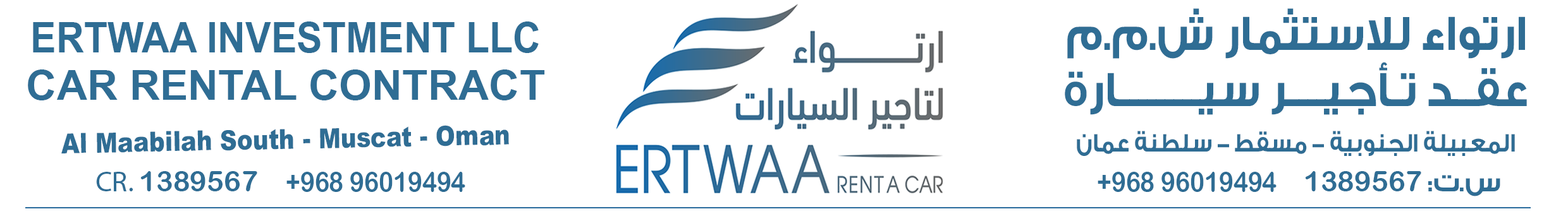
<style>
.page{position:relative;width:1568px;height:221px;background:#ffffff}
.page>*{position:absolute;margin:0}
.t1{font:51.1px "GESSTwoBold-Bold";color:#2f6d94;scale:0.88 1}
.t2{font:42.5px "ArialNarrow-Bold";color:#2f6d94;text-transform:uppercase;scale:1.11 1}
.t3{font:51.1px "GESSTwoBold-Bold";color:#2f6d94;scale:0.87 1}
.t4{font:41px "ArialNarrow-Bold";color:#2f6d94;text-transform:uppercase;scale:1.25 1}
.t5{font:27.6px "Arial-Black";color:#2f6d94;scale:0.85 1}
.t6{font:27px "GESSTwoBold-Bold";color:#2f6d94;scale:0.86 1}
.t7{font:28.5px "ArialRoundedMTBold";color:#2f6d94}
.t8{font:28.5px "MyriadPro-Regular";color:#2f6d94}
.t9{font:28.5px "ArialRoundedMTBold";color:#2f6d94;scale:0.86 1}
.t10{font:28.5px "GESSTwoBold-Bold";color:#2f6d94}
</style>
<div class="page">
<p class="t1" style="left:1067px;top:8px;width:458px;height:51px">ارتواء للاستثمار ش.م.م</p>
<p class="t2" style="left:33px;top:21px;width:506px;height:32px">ErtwAa Investment LLC</p>
<p class="t3" style="left:1065px;top:62px;width:462px;height:53px">عقــد تـأجيــــر سيـــــــــارة</p>
<p class="t4" style="left:28px;top:70px;width:517px;height:31px">Car rental contract</p>
<p class="t5" style="left:61px;top:125px;width:448px;height:29px;rotate:-1deg">Al Maabilah South - Muscat - Oman</p>
<p class="t6" style="left:1077px;top:131px;width:438px;height:25px">المعبيلة الجنوبية - مسقط - سلطنة عمان</p>
<p class="t7" style="left:96px;top:171px;width:161px;height:21px"><span class="t8">CR. </span>1389567</p>
<p class="t9" style="left:286px;top:172px;width:179px;height:20px">+968 96019494</p>
<p class="t9" style="left:1098px;top:172px;width:179px;height:20px">+968 96019494</p>
<p class="t7" style="left:1305px;top:171px;width:195px;height:26px"><span class="t10"> س.ت: </span>1389567</p>
</div>
